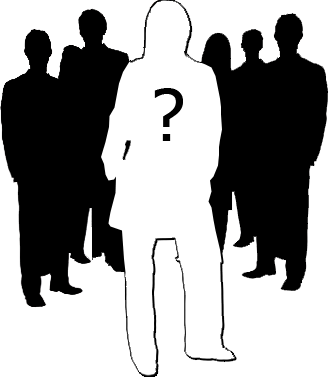
<style>
.page{position:relative;width:329px;height:377px;background:#ffffff}
.page>*{position:absolute;margin:0}
.t1{font:72px "Tahoma";color:#000000}
</style>
<div class="page">
<p class="t1" style="left:154px;top:88px;width:29px;height:53px">?</p>
</div>
